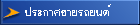
<style>
.page{position:relative;width:140px;height:25px}
.page>*{position:absolute;margin:0}
.t1{font:15.3px "EucrosiaDSE";color:#ffffff;scale:1.12 1}
</style>
<div class="page">
<p class="t1" style="left:25px;top:4px;width:86px;height:12px">»ÃÐ¡ÒÈ¢ÒÂÃ¶Â¹µì</p>
</div>
